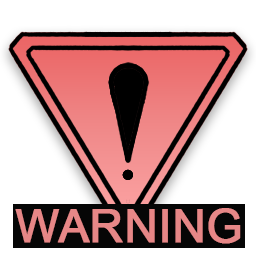
<style>
.page{position:relative;width:256px;height:256px;background:#ffffff}
.page>*{position:absolute;margin:0}
.t1{font:45.8px "ArialMT";color:#e78787;font-weight:bold}
</style>
<div class="page">
<p class="t1" style="left:15px;top:208px;width:226px;height:36px">WARNING</p>
</div>
